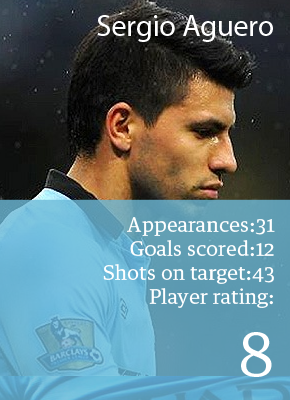
<style>
.page{position:relative;width:290px;height:400px}
.page>*{position:absolute;margin:0}
.t1{font:30px "MyriadPro-Regular";color:#ffffff}
.t2{font:20px "TE32TextEgyptian";color:#ffffff}
.t3{font:60px "TE32TextEgyptian";color:#ffffff}
</style>
<div class="page">
<p class="t1" style="left:97px;top:15px;width:176px;height:27px">Sergio Aguero</p>
<p class="t2" style="left:103px;top:217px;width:172px;height:160px;text-align:right">Appearances:31<br>Goals scored:12<br>Shots on target:43<br>Player rating:<br><span class="t3">8</span></p>
</div>
